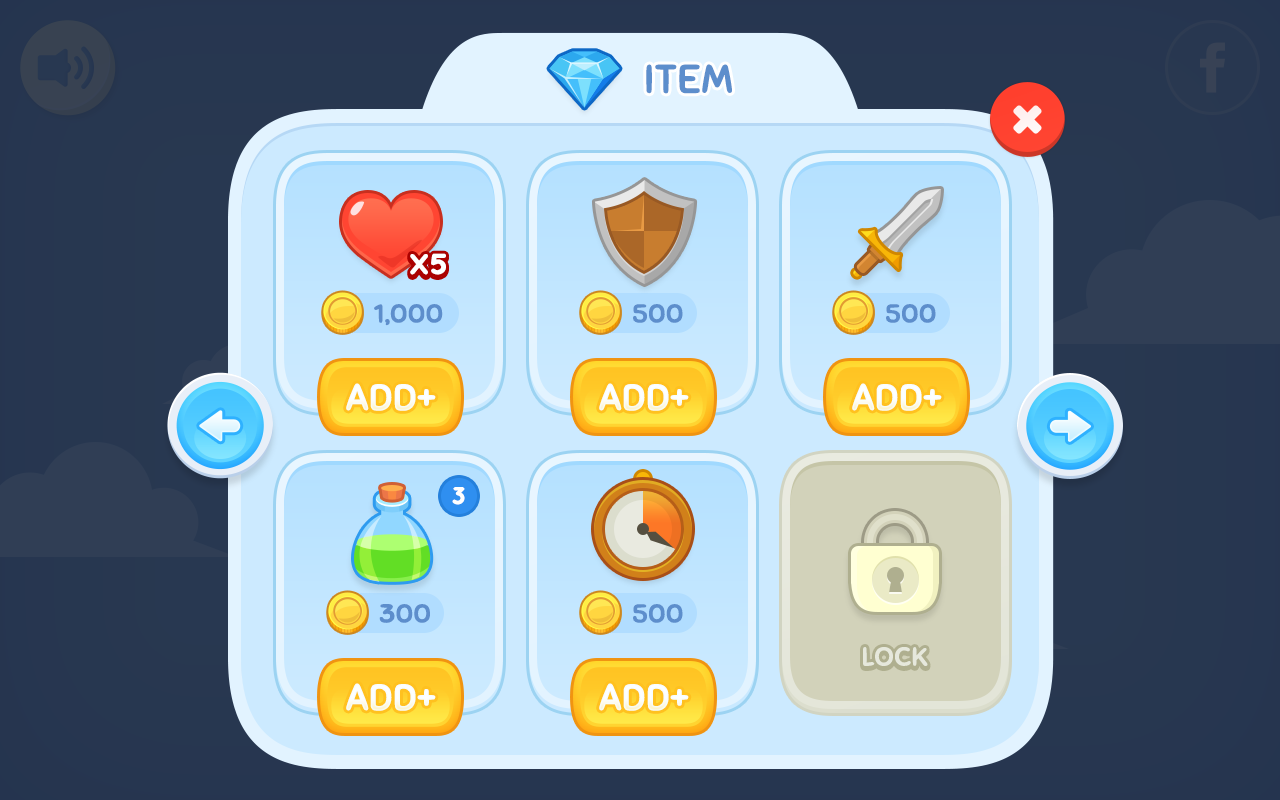
<style>
.page{position:relative;width:1280px;height:800px}
.page>*{position:absolute;margin:0}
.t1{font:38.8px "Sniglet-Regular";letter-spacing:-0.025em;color:#5d8ecc;text-transform:uppercase;font-weight:bold;scale:1.06 1}
.t2{font:28.2px "QuicksandBold-Regular";letter-spacing:-0.1em;font-weight:bold;scale:1.12 1}
.t3{font:28.2px "QuicksandBold-Regular";letter-spacing:-0.1em;color:#ffffff;font-weight:bold;scale:1.12 1}
.t4{font:25.2px "Sniglet-Regular";color:#5d8ecc;text-transform:uppercase;font-weight:bold;scale:1.11 1}
.t5{font:35.6px "Sniglet-Regular";color:#ffffff;font-weight:bold;scale:1.05 1}
.t6{font:23.8px "QuicksandBold-Regular";letter-spacing:-0.1em;color:#ffffff;font-weight:bold;scale:1.06 1}
.t7{font:25.2px "Sniglet-Regular";text-transform:uppercase;font-weight:bold;scale:1.11 1}
.t8{font:25.2px "Sniglet-Regular";color:#e6e8dc;text-transform:uppercase;font-weight:bold;scale:1.11 1}
</style>
<div class="page">
<p class="t1" style="left:646px;top:64px;width:86px;height:30px">ITem</p>
<p class="t2" style="left:410px;top:256px;width:36px;height:21px">X5</p>
<p class="t3" style="left:410px;top:253px;width:36px;height:22px">X5</p>
<p class="t4" style="left:374px;top:304px;width:69px;height:22px">1,000</p>
<p class="t4" style="left:633px;top:304px;width:50px;height:19px">500</p>
<p class="t4" style="left:886px;top:304px;width:50px;height:19px">500</p>
<p class="t5" style="left:346px;top:383px;width:90px;height:28px">ADD+</p>
<p class="t5" style="left:599px;top:383px;width:90px;height:28px">ADD+</p>
<p class="t5" style="left:852px;top:383px;width:90px;height:28px">ADD+</p>
<p class="t6" style="left:452px;top:487px;width:13px;height:18px">3</p>
<p class="t4" style="left:379px;top:604px;width:51px;height:19px">300</p>
<p class="t4" style="left:633px;top:604px;width:50px;height:19px">500</p>
<p class="t7" style="left:863px;top:649px;width:65px;height:19px">LOCK</p>
<p class="t8" style="left:863px;top:647px;width:65px;height:19px">LOCK</p>
<p class="t5" style="left:346px;top:683px;width:90px;height:28px">ADD+</p>
<p class="t5" style="left:599px;top:683px;width:90px;height:28px">ADD+</p>
</div>
